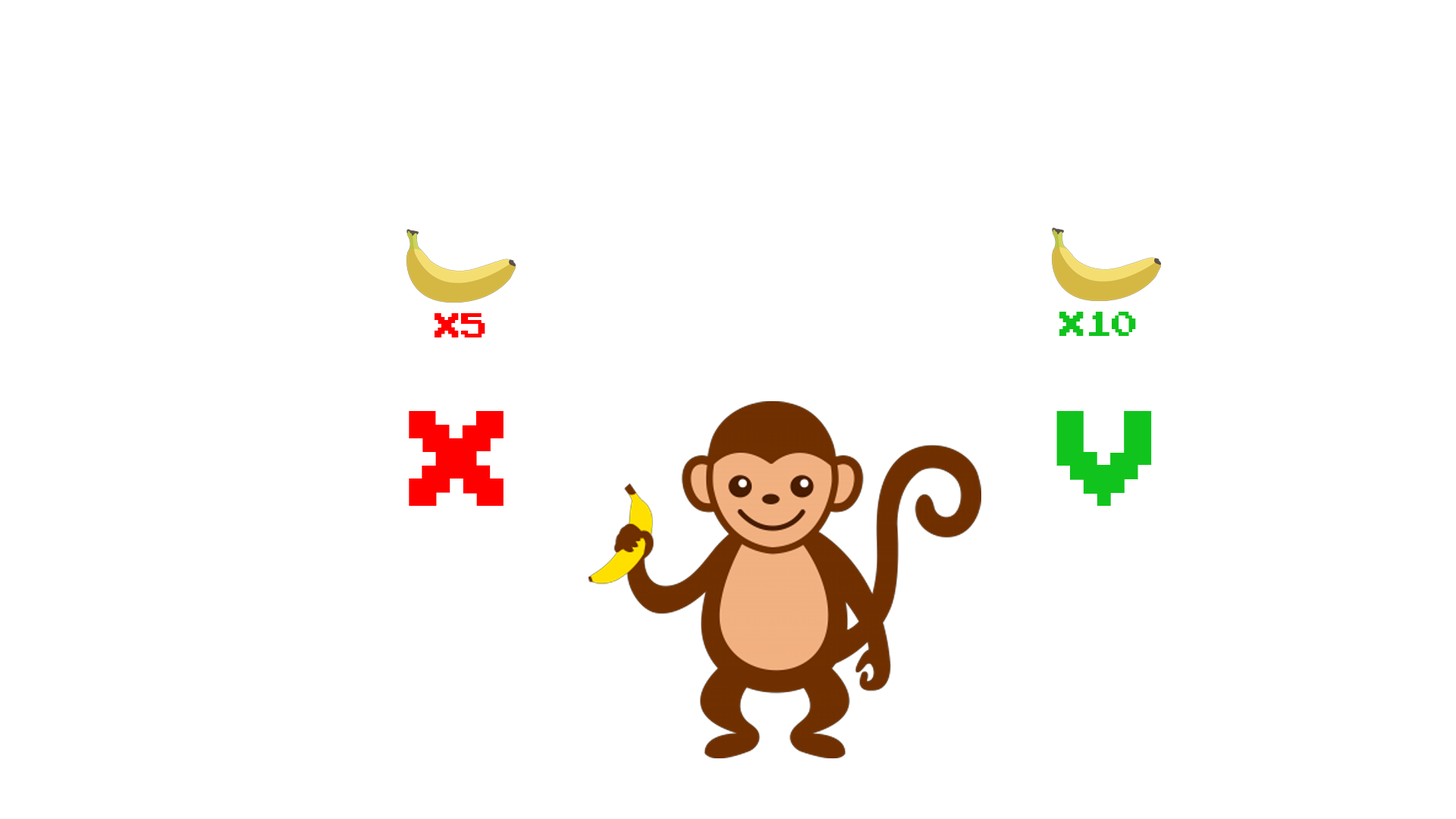
<style>
.page{position:relative;width:1456px;height:819px;background:#ffffff}
.page>*{position:absolute;margin:0}
.t1{font:47.6px "ArcadeClassic";color:#ff0000}
.t2{font:47.6px "ArcadeClassic";color:#10c41d}
.t3{font:189.8px "ArcadeClassic";color:#ff0000}
.t4{font:189.8px "ArcadeClassic";color:#10c41d}
</style>
<div class="page">
<p class="t1" style="left:435px;top:313px;width:50px;height:24px">x5</p>
<p class="t2" style="left:1059px;top:312px;width:77px;height:24px">x10</p>
<p class="t3" style="left:409px;top:411px;width:95px;height:95px">X</p>
<p class="t3" style="left:1056px;top:411px;width:96px;height:95px"><span class="t4">V</span>ii</p>
</div>
